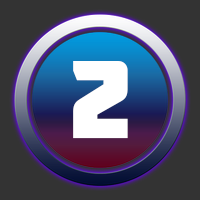
<style>
.page{position:relative;width:200px;height:200px;background:#333333}
.page>*{position:absolute;margin:0}
.t1{font:110px "Molot";color:#ffffff}
</style>
<div class="page">
<p class="t1" style="left:73px;top:61px;width:55px;height:78px">2</p>
</div>
